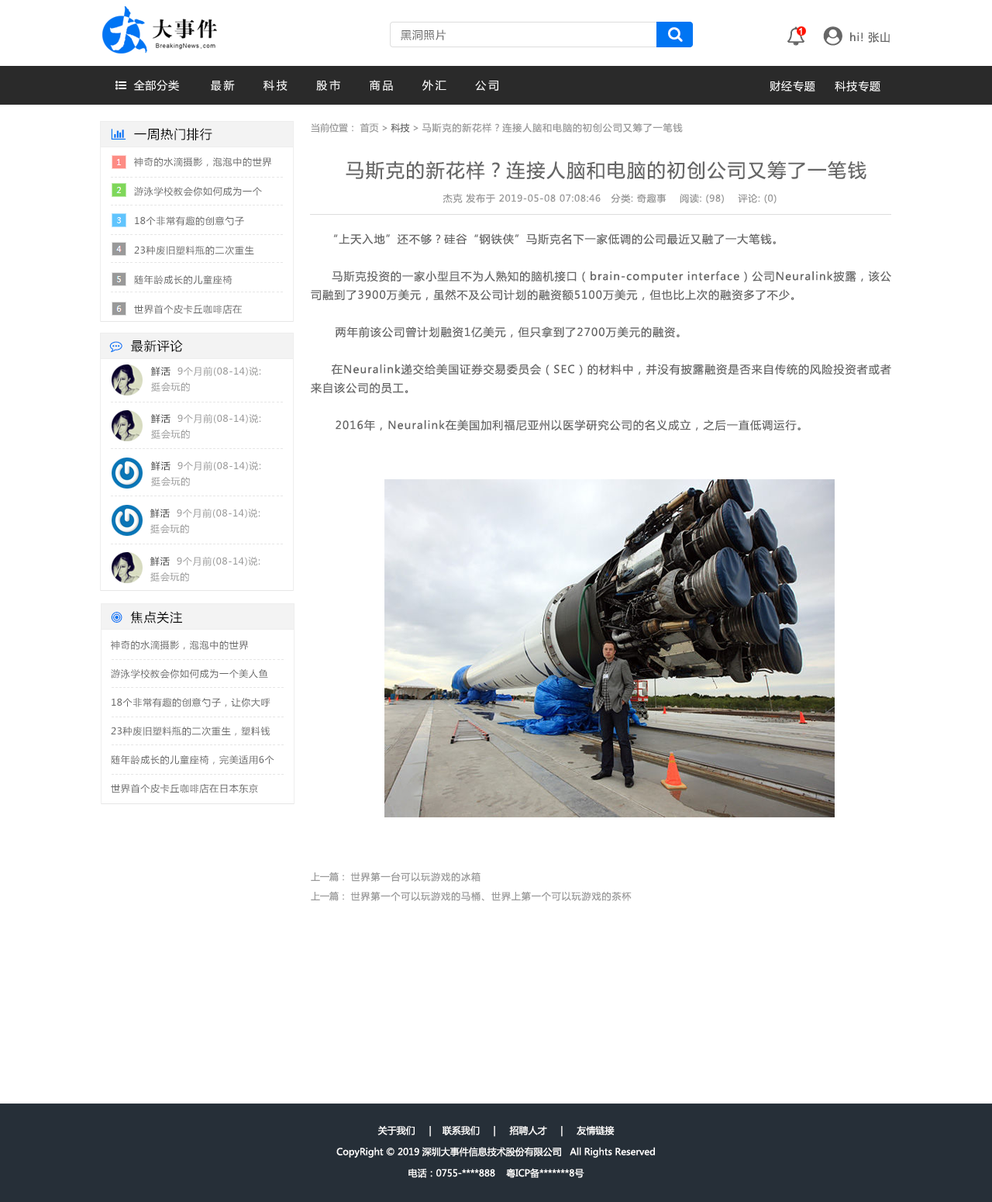
<style>
.page{position:relative;width:992px;height:1202px;background:#ffffff}
.page>*{position:absolute;margin:0}
.t1{font:10.9px "MicrosoftYaHei";letter-spacing:0.06em;color:#666666}
.t2{font:9.3px "ArialMT";letter-spacing:0.06em;color:#ffffff}
.t3{font:10.9px "MicrosoftYaHei";letter-spacing:0.06em;color:#ffffff}
.t4{font:9.3px "MicrosoftYaHei";letter-spacing:0.08em;color:#999999}
.t5{font:9.3px "MicrosoftYaHei";color:#999999}
.t6{font:9.3px "MicrosoftYaHei";color:#666666}
.t7{font:9.3px/29.5px "MicrosoftYaHei";letter-spacing:0.06em;color:#666666}
.t8{font:18.6px "MicrosoftYaHei";letter-spacing:0.08em;color:#666666}
.t9{font:9.3px "MicrosoftYaHei";letter-spacing:0.06em;color:#999999}
.t10{font:10.9px/18.6px "MicrosoftYaHei";letter-spacing:0.08em;color:#666666}
.t11{font:9.3px/15.5px "MicrosoftYaHei";letter-spacing:0.06em;color:#999999}
.t12{font:9.3px/15.5px "MicrosoftYaHei";letter-spacing:0.06em;color:#333333}
.t13{font:9.3px/28.7px "MicrosoftYaHei";letter-spacing:0.06em;color:#666666}
.t14{font:9.3px/21.3px "MicrosoftYaHei";color:#ffffff}
</style>
<div class="page">
<p class="t1" style="left:401px;top:29px;width:46px;height:11px">黑洞照片</p>
<p class="t2" style="left:799px;top:28px;width:3px;height:7px">1</p>
<p class="t1" style="left:850px;top:32px;width:40px;height:11px">hi! 张山</p>
<p class="t3" style="left:770px;top:81px;width:111px;height:10px">财经专题     科技专题</p>
<p class="t4" style="left:311px;top:122px;width:372px;height:11px"><span class="t5">当前位置： 首页 &gt; </span><span class="t6">科技</span><span class="t5"> &gt; </span>马斯克的新花样？连接人脑和电脑的初创公司又筹了一笔钱</p>
<p class="t7" style="left:134px;top:157px;width:138px;height:157px">神奇的水滴摄影，泡泡中的世界<br>游泳学校教会你如何成为一个<br>18个非常有趣的创意勺子<br>23种废旧塑料瓶的二次重生<br>随年龄成长的儿童座椅<br>世界首个皮卡丘咖啡店在</p>
<p class="t8" style="left:346px;top:160px;width:521px;height:20px">马斯克的新花样？连接人脑和电脑的初创公司又筹了一笔钱</p>
<p class="t9" style="left:443px;top:193px;width:334px;height:11px">杰克 发布于 2019-05-08 07:08:46   分类: 奇趣事    阅读: (98)    评论: (0)</p>
<p class="t10" style="left:311px;top:233px;width:581px;height:198px;text-align:justify">“上天入地”还不够？硅谷“钢铁侠”马斯克名下一家低调的公司最近又融了一大笔钱。<br><br>      马斯克投资的一家小型且不为人熟知的脑机接口（brain-computer interface）公司Neuralink披露，该公司融到了3900万美元，虽然不及公司计划的融资额5100万美元，但也比上次的融资多了不少。<br><br>      两年前该公司曾计划融资1亿美元，但只拿到了2700万美元的融资。<br><br>     在Neuralink递交给美国证券交易委员会（SEC）的材料中，并没有披露融资是否来自传统的风险投资者或者来自该公司的员工。<br><br>      2016年，Neuralink在美国加利福尼亚州以医学研究公司的名义成立，之后一直低调运行。</p>
<p class="t11" style="left:151px;top:367px;width:110px;height:25px"><span class="t12">鲜活  </span>9个月前(08-14)说:<br>挺会玩的</p>
<p class="t11" style="left:151px;top:414px;width:110px;height:25px"><span class="t12">鲜活  </span>9个月前(08-14)说:<br>挺会玩的</p>
<p class="t11" style="left:151px;top:461px;width:110px;height:25px"><span class="t12">鲜活  </span>9个月前(08-14)说:<br>挺会玩的</p>
<p class="t11" style="left:150px;top:509px;width:110px;height:24px"><span class="t12">鲜活  </span>9个月前(08-14)说:<br>挺会玩的</p>
<p class="t11" style="left:150px;top:557px;width:110px;height:24px"><span class="t12">鲜活  </span>9个月前(08-14)说:<br>挺会玩的</p>
<p class="t13" style="left:111px;top:640px;width:163px;height:153px">神奇的水滴摄影，泡泡中的世界<br>游泳学校教会你如何成为一个美人鱼<br>18个非常有趣的创意勺子，让你大呼<br>23种废旧塑料瓶的二次重生，塑料钱<br>随年龄成长的儿童座椅，完美适用6个<br>世界首个皮卡丘咖啡店在日本东京</p>
<p class="t4" style="left:311px;top:871px;width:170px;height:10px"><span class="t5">上一篇： </span>世界第一台可以玩游戏的冰箱</p>
<p class="t4" style="left:311px;top:891px;width:321px;height:10px"><span class="t5">上一篇： </span>世界第一个可以玩游戏的马桶、世界上第一个可以玩游戏的茶杯</p>
<p class="t14" style="left:336px;top:1125px;width:319px;height:53px;text-align:center">关于我们     |    联系我们     |     招聘人才     |     友情链接<br>CopyRight © 2019 深圳大事件信息技术股份有限公司   All Rights Reserved<br>电话：0755-****888    粤ICP备*******8号</p>
</div>
